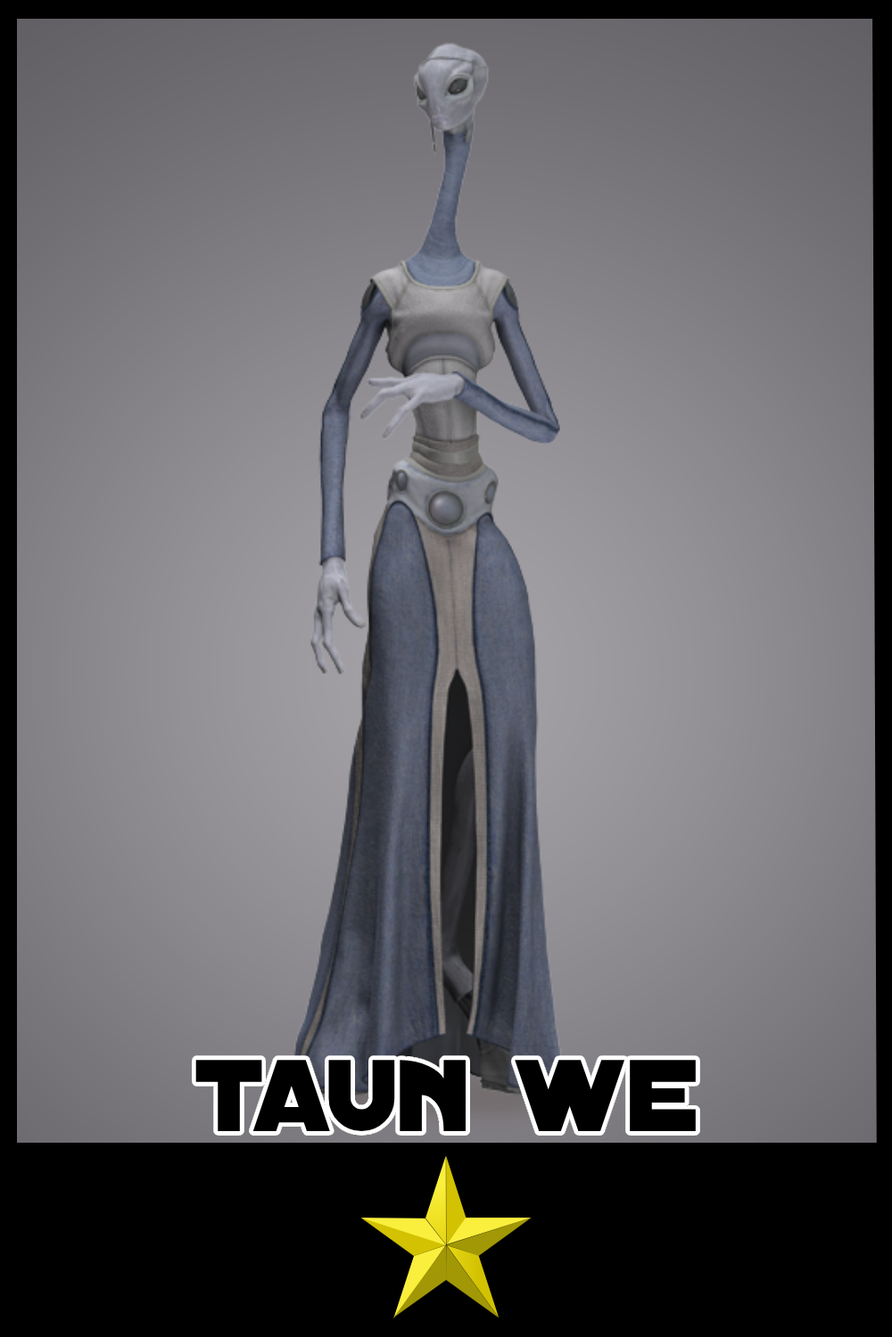
<style>
.page{position:relative;width:892px;height:1337px}
.page>*{position:absolute;margin:0}
.t1{font:109.5px "DistantGalaxy";color:#000000}
</style>
<div class="page">
<p class="t1" style="left:195px;top:1060px;width:500px;height:71px">taun we</p>
</div>
